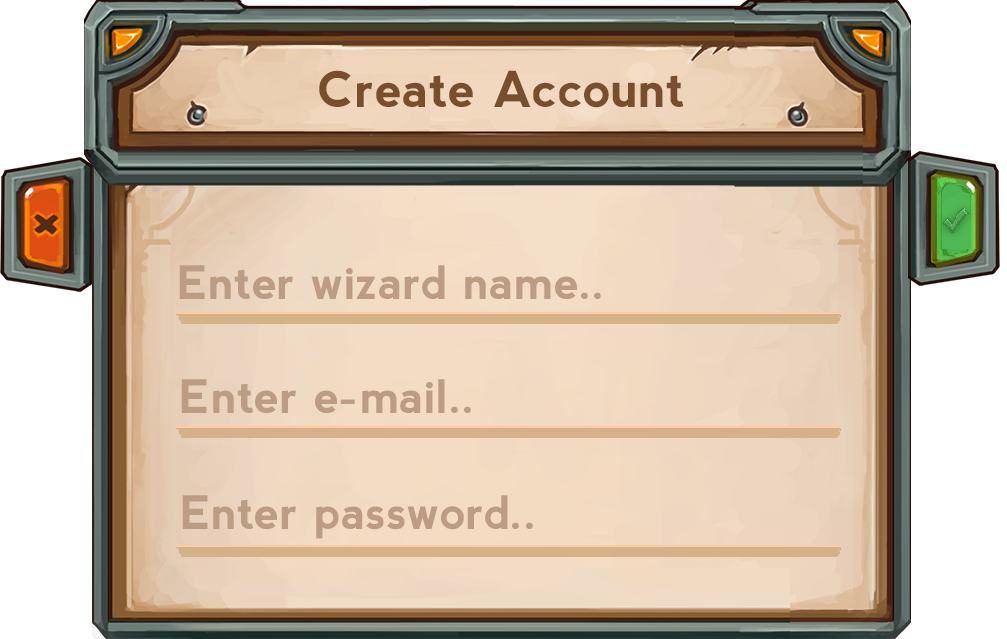
<style>
.page{position:relative;width:1007px;height:639px}
.page>*{position:absolute;margin:0}
.t1{font:49.5px "nevis-Bold";color:#784e2c}
.t2{font:46px "nevis-Bold";color:#bc9d83}
</style>
<div class="page">
<p class="t1" style="left:319px;top:70px;width:365px;height:38px">Create Account</p>
<p class="t2" style="left:179px;top:265px;width:422px;height:34px">Enter wizard name..</p>
<p class="t2" style="left:181px;top:379px;width:290px;height:34px">Enter e-mail..</p>
<p class="t2" style="left:182px;top:495px;width:351px;height:44px">Enter password..</p>
</div>
